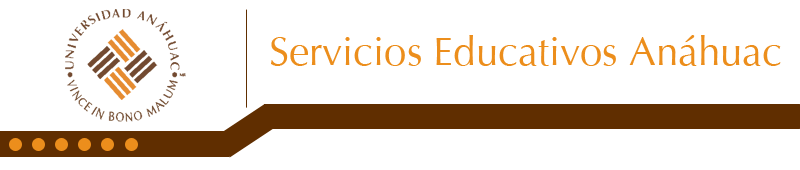
<style>
.page{position:relative;width:800px;height:170px;background:#ffffff}
.page>*{position:absolute;margin:0}
.t1{font:40px "Optima";color:#ec8e1c}
</style>
<div class="page">
<p class="t1" style="left:271px;top:35px;width:510px;height:31px">Servicios Educativos Anáhuac</p>
</div>
